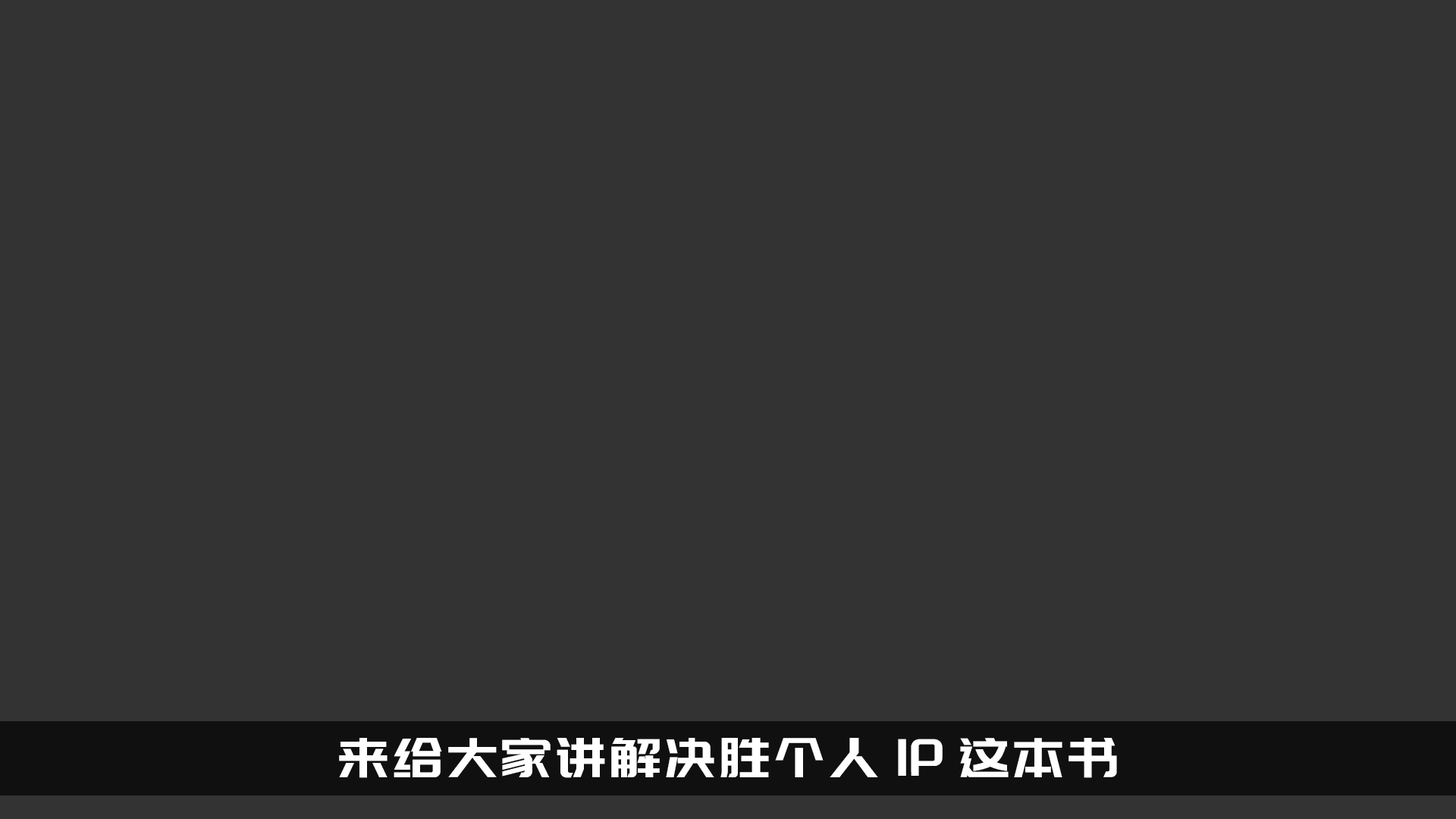
<style>
.page{position:relative;width:1456px;height:819px;background:#333333}
.page>*{position:absolute;margin:0}
.t1{font:54.6px "PangMenZhengDao-3";color:#ffffff}
</style>
<div class="page">
<p class="t1" style="left:339px;top:738px;width:778px;height:40px">来给大家讲解决胜个人IP这本书</p>
</div>
